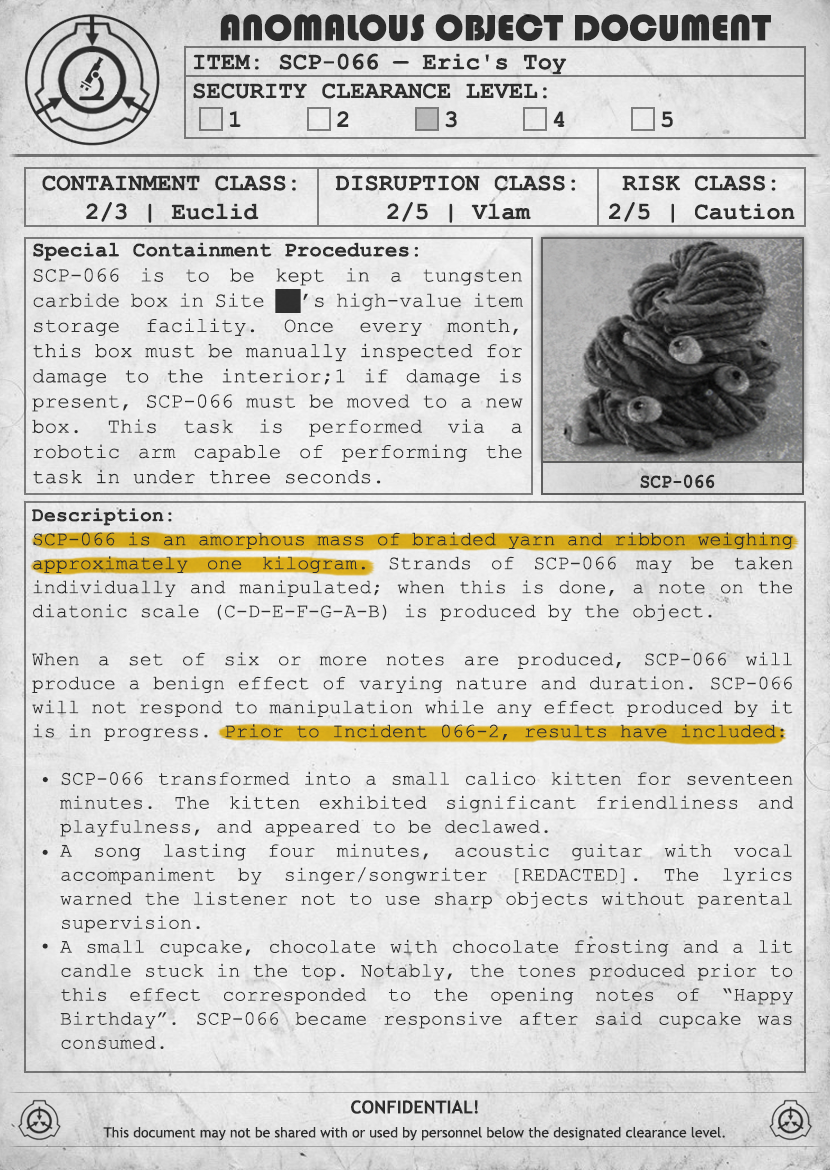
<style>
.page{position:relative;width:830px;height:1170px}
.page>*{position:absolute;margin:0}
.t1{font:38px "Bauhaus93";color:#333333;text-transform:uppercase}
.t2{font:24px "CourierNewPS-BoldMT";color:#333333}
.t3{font:24px "CourierNewPS-BoldMT";color:#333333;text-transform:uppercase}
.t4{font:21px "CourierNewPSMT";color:#333333}
.t5{font:21px "CourierNewPS-BoldMT";color:#333333}
.t6{font:20.1px "CourierNewPS-BoldMT";color:#333333;scale:0.9 1}
.t7{font:20px "CourierNewPSMT";color:#333333}
.t8{font:20px "CourierNewPS-BoldMT";color:#333333}
.t9{font:14px/24px "TrebuchetMS";color:#333333}
.t10{font:18px/24px "TrebuchetMS-Bold";color:#333333}
</style>
<div class="page">
<p class="t1" style="left:220px;top:14px;width:551px;height:27px">anomalous object document</p>
<p class="t2" style="left:193px;top:53px;width:480px;height:75px">ITEM: SCP-066 — Eric's Toy<br><span class="t3">Security CLEARANCE LEVEL:</span> <br> 1   2   3   4   5</p>
<p class="t2" style="left:42px;top:175px;width:254px;height:48px;text-align:center">CONTAINMENT CLASS:<br>2/3 | Euclid</p>
<p class="t2" style="left:335px;top:175px;width:241px;height:48px;text-align:center">DISRUPTION CLASS:<br>2/5 | Vlam</p>
<p class="t2" style="left:609px;top:175px;width:186px;height:48px;text-align:center">RISK CLASS:<br>2/5 | Caution</p>
<p class="t4" style="left:32px;top:242px;width:491px;height:242px;text-align:justify"><span class="t5">Special Containment Procedures:<br></span>SCP-066 is to be kept in a tungsten carbide box in Site ██’s high-value item storage facility. Once every month, this box must be manually inspected for damage to the interior;1 if damage is present, SCP-066 must be moved to a new box. This task is performed via a robotic arm capable of performing the task in under three seconds.</p>
<p class="t6" style="left:640px;top:474px;width:75px;height:15px">SCP-066</p>
<p class="t7" style="left:32px;top:508px;width:761px;height:233px;text-align:justify"><span class="t8">Description:<br></span>SCP-066 is an amorphous mass of braided yarn and ribbon weighing approximately one kilogram. Strands of SCP-066 may be taken individually and manipulated; when this is done, a note on the diatonic scale (C-D-E-F-G-A-B) is produced by the object.<br><br>When a set of six or more notes are produced, SCP-066 will produce a benign effect of varying nature and duration. SCP-066 will not respond to manipulation while any effect produced by it is in progress. Prior to Incident 066-2, results have included:</p>
<p class="t7" style="left:60px;top:771px;width:734px;height:278px;text-align:justify">SCP-066 transformed into a small calico kitten for seventeen minutes. The kitten exhibited significant friendliness and playfulness, and appeared to be declawed.<br>A song lasting four minutes, acoustic guitar with vocal accompaniment by singer/songwriter [REDACTED]. The lyrics warned the listener not to use sharp objects without parental supervision.<br>A small cupcake, chocolate with chocolate frosting and a lit candle stuck in the top. Notably, the tones produced prior to this effect corresponded to the opening notes of “Happy Birthday”. SCP-066 became responsive after said cupcake was consumed.</p>
<p class="t4" style="left:42px;top:777px;width:6px;height:6px">•</p>
<p class="t4" style="left:42px;top:849px;width:6px;height:6px">•</p>
<p class="t4" style="left:42px;top:943px;width:6px;height:6px">•</p>
<p class="t9" style="left:103px;top:1100px;width:622px;height:41px;text-align:center"><span class="t10">CONFIDENTIAL!<br></span>This document may not be shared with or used by personnel below the designated clearance level.</p>
</div>
